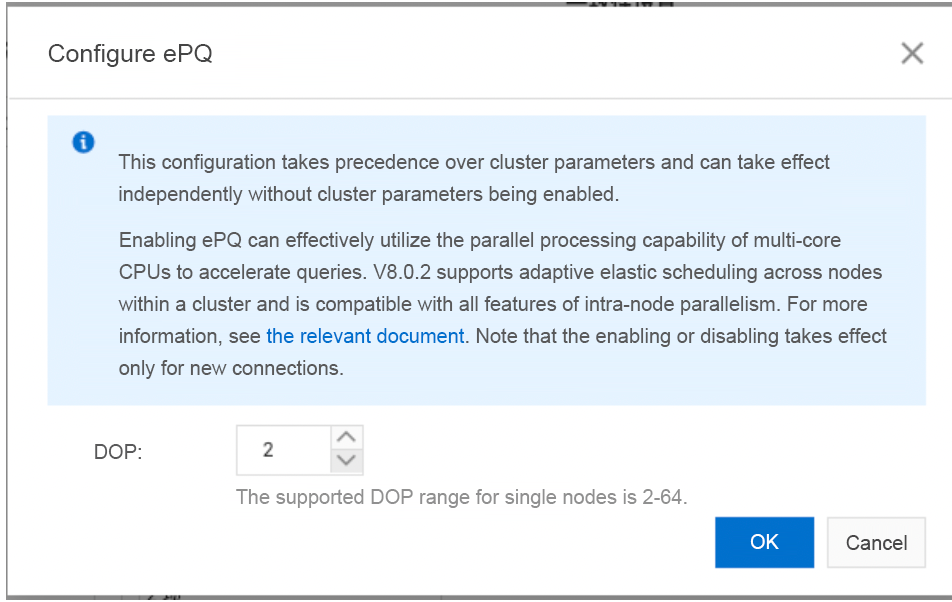
<style>
.page{position:relative;width:952px;height:602px;background:#ffffff}
.page>*{position:absolute;margin:0}
.t1{font:25px "ArialMT";color:#454545}
.t2{font:20px/32px "ArialMT";color:#59595a}
.t3{font:20px/32px "ArialMT";color:#0070cd}
.t4{font:20px "ArialMT";color:#59595a}
.t5{font:20px "ArialMT";color:#909090}
.t6{font:20px "ArialMT";color:#ffffff}
.t7{font:20px "ArialMT";color:#484748}
</style>
<div class="page">
<p class="t1" style="left:48px;top:44px;width:164px;height:23px">Configure ePQ</p>
<p class="t2" style="left:118px;top:154px;width:712px;height:51px">This configuration takes precedence over cluster parameters and can take effect <br>independently without cluster parameters being enabled.</p>
<p class="t2" style="left:118px;top:232px;width:769px;height:147px">Enabling ePQ can effectively utilize the parallel processing capability of multi-core <br>CPUs to accelerate queries. V8.0.2 supports adaptive elastic scheduling across nodes <br>within a cluster and is compatible with all features of intra-node parallelism. For more <br>information, see <span class="t3">the relevant document</span>. Note that the enabling or disabling takes effect <br>only for new connections.</p>
<p class="t4" style="left:95px;top:444px;width:46px;height:15px">DOP:</p>
<p class="t5" style="left:236px;top:489px;width:451px;height:19px">The supported DOP range for single nodes is 2-64.</p>
<p class="t6" style="left:750px;top:534px;width:29px;height:15px">OK</p>
<p class="t7" style="left:846px;top:535px;width:61px;height:15px">Cancel</p>
</div>
